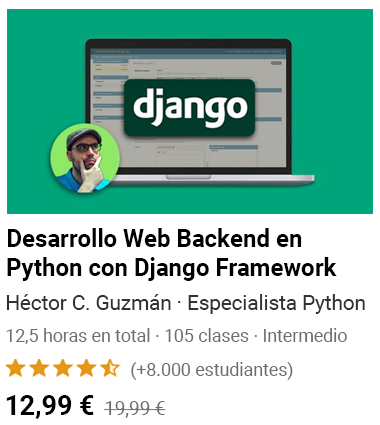
<style>
.page{position:relative;width:380px;height:425px;background:#ffffff}
.page>*{position:absolute;margin:0}
.t1{font:24.7px/28.8px "Roboto-Bold";color:#000000}
.t2{font:20.9px "Roboto-Regular";color:#303335}
.t3{font:18.3px "Roboto-Regular";color:#6a6f73;scale:0.97 1}
.t4{font:18.2px "Roboto-Regular";color:#6a6f73}
.t5{font:27.7px "Roboto-Bold";color:#000000;scale:0.97 1}
.t6{font:19.4px "Roboto-Regular";color:#6a6f73}
</style>
<div class="page">
<p class="t1" style="left:7px;top:228px;width:330px;height:53px">Desarrollo Web Backend en Python con Django Framework</p>
<p class="t2" style="left:6px;top:294px;width:359px;height:20px">Héctor C. Guzmán · Especialista Python</p>
<p class="t3" style="left:6px;top:328px;width:341px;height:16px">12,5 horas en total · 105 clases · Intermedio</p>
<p class="t4" style="left:131px;top:362px;width:162px;height:18px">(+8.000 estudiantes)</p>
<p class="t5" style="left:6px;top:395px;width:88px;height:24px">12,99 €</p>
<p class="t6" style="left:104px;top:401px;width:62px;height:17px">19,99 €</p>
</div>
